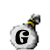
<style>
.page{position:relative;width:50px;height:50px;background:#ffffff}
.page>*{position:absolute;margin:0}
.t1{font:17px "Ravie";color:#030300}
</style>
<div class="page">
<p class="t1" style="left:15px;top:29px;width:14px;height:16px">G</p>
</div>
